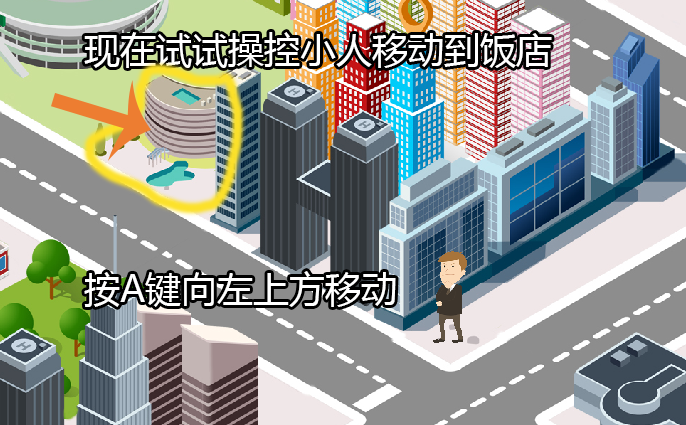
<style>
.page{position:relative;width:686px;height:425px}
.page>*{position:absolute;margin:0}
.t1{font:36px "MicrosoftYaHei";color:#ffffff}
</style>
<div class="page">
<p class="t1" style="left:84px;top:32px;width:468px;height:36px">现在试试操控小人移动到饭店</p>
<p class="t1" style="left:84px;top:271px;width:312px;height:36px">按A键向左上方移动</p>
</div>
